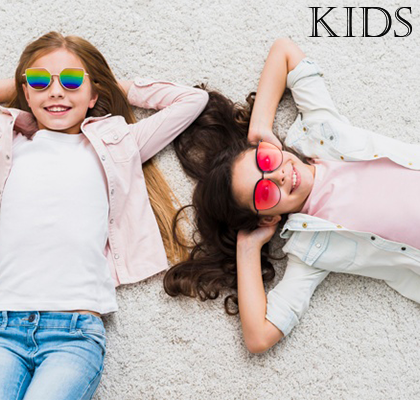
<style>
.page{position:relative;width:420px;height:400px}
.page>*{position:absolute;margin:0}
.t1{font:41.7px "Castellar";color:#090909}
</style>
<div class="page">
<p class="t1" style="left:307px;top:7px;width:105px;height:30px">KIDS</p>
</div>
